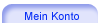
<style>
.page{position:relative;width:100px;height:23px;background:#e1e4fc}
.page>*{position:absolute;margin:0}
.t1{font:11px "ArialMT";color:#092ff6}
</style>
<div class="page">
<p class="t1" style="left:25px;top:12px;width:54px;height:8px">Mein Konto</p>
</div>
